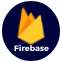
<style>
.page{position:relative;width:62px;height:62px;background:#01033c}
.page>*{position:absolute;margin:0}
.t1{font:8px "Alexandria-Bold";color:#ffffff}
</style>
<div class="page">
<p class="t1" style="left:14px;top:44px;width:35px;height:8px">Firebase</p>
</div>
